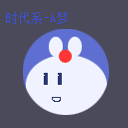
<style>
.page{position:relative;width:128px;height:128px;background:#4b4a5a}
.page>*{position:absolute;margin:0}
.t1{font:12px "SimSun";letter-spacing:0.04em;color:#3d52d1}
</style>
<div class="page">
<p class="t1" style="left:6px;top:12px;width:62px;height:12px">时代系-A梦</p>
</div>
